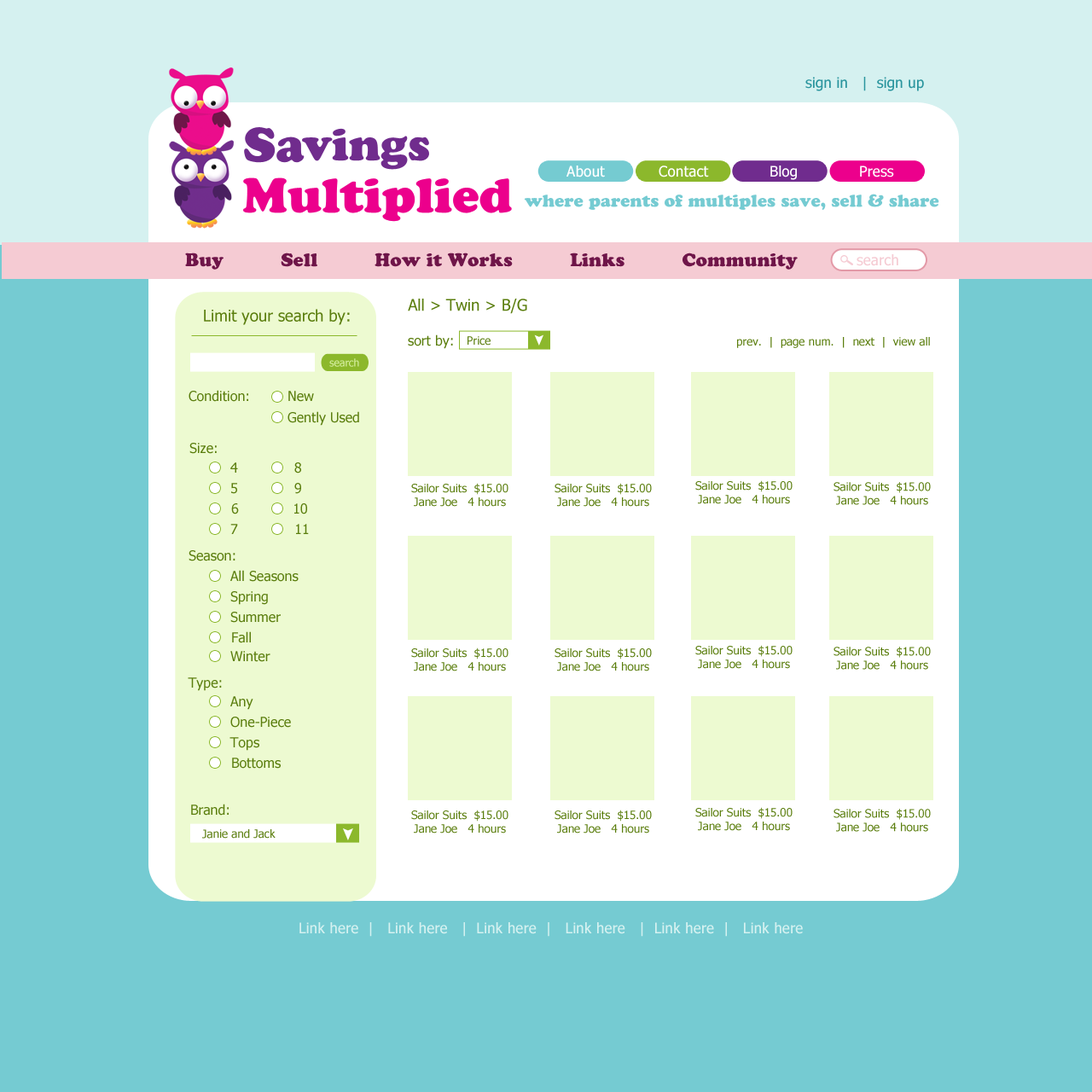
<style>
.page{position:relative;width:1092px;height:1092px;background:#75cbd2}
.page>*{position:absolute;margin:0}
.t1{font:14.8px "Tahoma";color:#2a959e}
.t2{font:14.8px "Tahoma";color:#ffffff}
.t3{font:18.2px "CooperBlackStd";color:#6f1549}
.t4{font:14.8px "Tahoma";color:#f5cbd3}
.t5{font:15.9px "Tahoma";color:#5b7e0e}
.t6{font:13.6px "Tahoma";color:#5b7e0e}
.t7{font:11.4px "Tahoma";color:#5b7e0e}
.t8{font:10.5px "Tahoma";color:#d4ed9e}
.t9{font:14.8px "Tahoma";color:#d5f1f0}
</style>
<div class="page">
<p class="t1" style="left:805px;top:77px;width:119px;height:14px">sign in   |  sign up</p>
<p class="t2" style="left:566px;top:166px;width:39px;height:11px">About</p>
<p class="t2" style="left:659px;top:166px;width:50px;height:11px">Contact</p>
<p class="t2" style="left:770px;top:166px;width:27px;height:14px">Blog</p>
<p class="t2" style="left:860px;top:166px;width:34px;height:11px">Press</p>
<p class="t3" style="left:185px;top:253px;width:613px;height:17px">Buy          Sell          How it Works          Links          Community</p>
<p class="t4" style="left:857px;top:254px;width:41px;height:12px">search</p>
<p class="t5" style="left:408px;top:299px;width:119px;height:15px">All &gt; Twin &gt; B/G</p>
<p class="t5" style="left:204px;top:309px;width:146px;height:16px">Limit your search by:</p>
<p class="t6" style="left:408px;top:334px;width:45px;height:15px">sort by:</p>
<p class="t7" style="left:468px;top:336px;width:23px;height:10px">Price</p>
<p class="t7" style="left:737px;top:337px;width:193px;height:11px">prev.  |  page num.  |  next  |  view all</p>
<p class="t8" style="left:329px;top:358px;width:30px;height:9px">search</p>
<p class="t6" style="left:189px;top:390px;width:59px;height:12px">Condition:</p>
<p class="t6" style="left:288px;top:391px;width:26px;height:11px">New</p>
<p class="t6" style="left:287px;top:411px;width:72px;height:15px">Gently Used</p>
<p class="t6" style="left:189px;top:443px;width:28px;height:11px">Size:</p>
<p class="t6" style="left:230px;top:462px;width:8px;height:11px">4</p>
<p class="t6" style="left:294px;top:462px;width:7px;height:11px">8</p>
<p class="t6" style="left:231px;top:483px;width:6px;height:11px">5</p>
<p class="t6" style="left:294px;top:483px;width:7px;height:11px">9</p>
<p class="t7" style="left:411px;top:483px;width:97px;height:24px;text-align:center">Sailor Suits  $15.00<br>Jane Joe   4 hours</p>
<p class="t7" style="left:555px;top:483px;width:97px;height:24px;text-align:center">Sailor Suits  $15.00<br>Jane Joe   4 hours</p>
<p class="t7" style="left:695px;top:480px;width:98px;height:24px;text-align:center">Sailor Suits  $15.00<br>Jane Joe   4 hours</p>
<p class="t7" style="left:833px;top:482px;width:98px;height:23px;text-align:center">Sailor Suits  $15.00<br>Jane Joe   4 hours</p>
<p class="t6" style="left:231px;top:503px;width:8px;height:11px">6</p>
<p class="t6" style="left:294px;top:503px;width:13px;height:11px">10</p>
<p class="t6" style="left:230px;top:524px;width:8px;height:10px">7</p>
<p class="t6" style="left:296px;top:524px;width:13px;height:10px">11</p>
<p class="t6" style="left:189px;top:550px;width:46px;height:11px">Season:</p>
<p class="t6" style="left:230px;top:570px;width:69px;height:12px">All Seasons</p>
<p class="t6" style="left:230px;top:591px;width:38px;height:14px">Spring</p>
<p class="t6" style="left:230px;top:612px;width:51px;height:11px">Summer</p>
<p class="t6" style="left:232px;top:631px;width:19px;height:12px">Fall</p>
<p class="t6" style="left:230px;top:651px;width:40px;height:11px">Winter</p>
<p class="t7" style="left:411px;top:648px;width:97px;height:23px;text-align:center">Sailor Suits  $15.00<br>Jane Joe   4 hours</p>
<p class="t7" style="left:555px;top:648px;width:97px;height:23px;text-align:center">Sailor Suits  $15.00<br>Jane Joe   4 hours</p>
<p class="t7" style="left:695px;top:645px;width:98px;height:24px;text-align:center">Sailor Suits  $15.00<br>Jane Joe   4 hours</p>
<p class="t7" style="left:833px;top:647px;width:98px;height:23px;text-align:center">Sailor Suits  $15.00<br>Jane Joe   4 hours</p>
<p class="t6" style="left:188px;top:677px;width:34px;height:14px">Type:</p>
<p class="t6" style="left:230px;top:696px;width:23px;height:14px">Any</p>
<p class="t6" style="left:230px;top:717px;width:61px;height:11px">One-Piece</p>
<p class="t6" style="left:229px;top:737px;width:30px;height:14px">Tops</p>
<p class="t6" style="left:232px;top:758px;width:49px;height:11px">Bottoms</p>
<p class="t6" style="left:191px;top:804px;width:38px;height:12px">Brand:</p>
<p class="t7" style="left:411px;top:810px;width:97px;height:23px;text-align:center">Sailor Suits  $15.00<br>Jane Joe   4 hours</p>
<p class="t7" style="left:555px;top:810px;width:97px;height:23px;text-align:center">Sailor Suits  $15.00<br>Jane Joe   4 hours</p>
<p class="t7" style="left:695px;top:807px;width:98px;height:24px;text-align:center">Sailor Suits  $15.00<br>Jane Joe   4 hours</p>
<p class="t7" style="left:833px;top:809px;width:98px;height:23px;text-align:center">Sailor Suits  $15.00<br>Jane Joe   4 hours</p>
<p class="t7" style="left:202px;top:829px;width:74px;height:10px">Janie and Jack</p>
<p class="t9" style="left:299px;top:922px;width:504px;height:15px">Link here  |   Link here   |  Link here  |   Link here   |  Link here  |   Link here</p>
</div>
